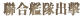
<style>
.page{position:relative;width:83px;height:18px;background:#ffffff}
.page>*{position:absolute;margin:0}
.t1{font:14px "RyuminPr6N-ExBold";color:#947f61;font-weight:bold;scale:0.9 1}
</style>
<div class="page">
<p class="t1" style="left:3px;top:2px;width:77px;height:14px;opacity:0.9">聯合艦隊出擊</p>
</div>
